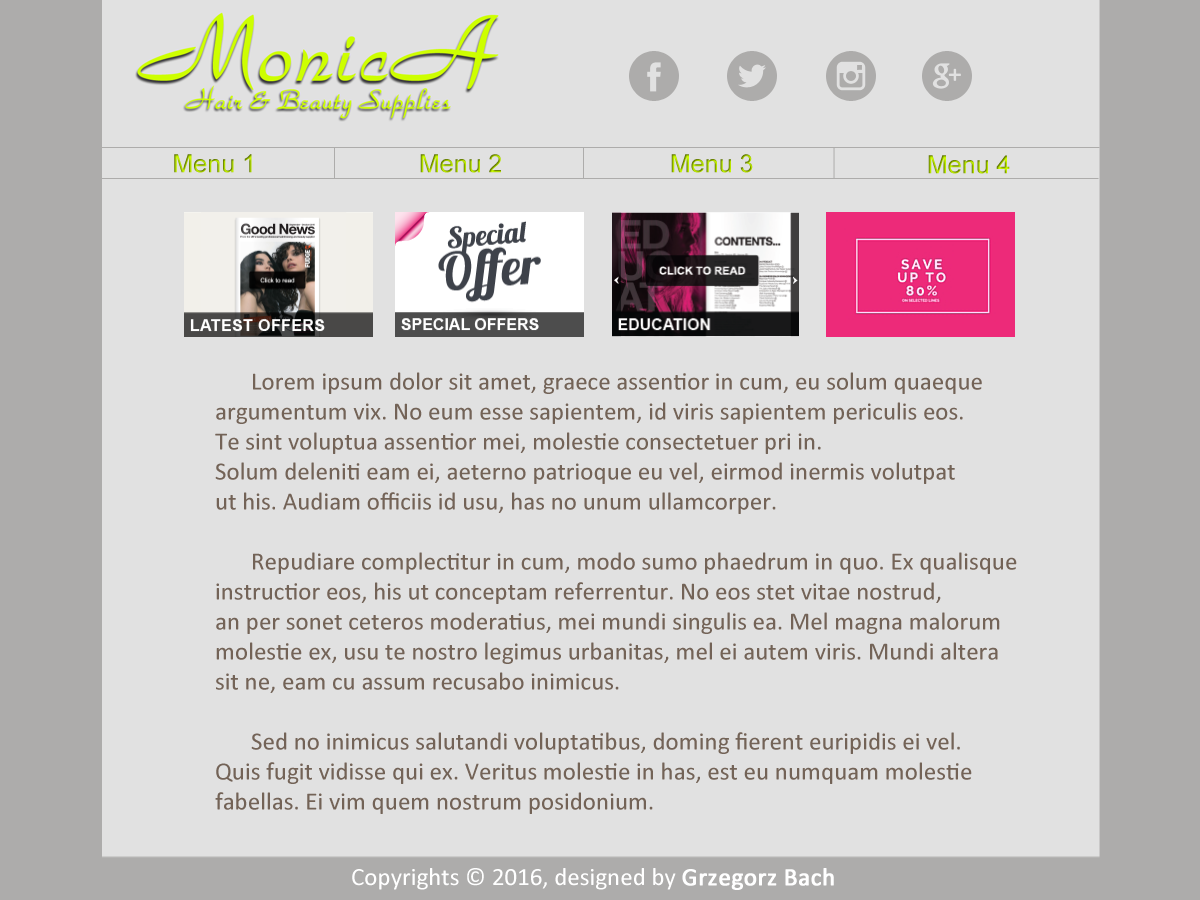
<style>
.page{position:relative;width:1200px;height:900px;background:#e1e1e1}
.page>*{position:absolute;margin:0}
.t1{font:25px "ArialMT"}
.t2{font:25px "Calibri";color:#736357}
.t3{font:25px "Calibri";color:#ffffff}
.t4{font:25px "Calibri";color:#ffffff;font-weight:bold}
</style>
<div class="page">
<p class="t1" style="left:174px;top:154px;width:78px;height:19px">Menu 1</p>
<p class="t1" style="left:420px;top:154px;width:81px;height:19px">Menu 2</p>
<p class="t1" style="left:671px;top:154px;width:82px;height:19px">Menu 3</p>
<p class="t1" style="left:928px;top:155px;width:82px;height:19px">Menu 4</p>
<p class="t2" style="left:215px;top:372px;width:802px;height:442px">Lorem ipsum dolor sit amet, graece assentior in cum, eu solum quaeque <br>argumentum vix. No eum esse sapientem, id viris sapientem periculis eos. <br>Te sint voluptua assentior mei, molestie consectetuer pri in. <br>Solum deleniti eam ei, aeterno patrioque eu vel, eirmod inermis volutpat <br>ut his. Audiam officiis id usu, has no unum ullamcorper.<br><br> Repudiare complectitur in cum, modo sumo phaedrum in quo. Ex qualisque <br>instructior eos, his ut conceptam referrentur. No eos stet vitae nostrud, <br>an per sonet ceteros moderatius, mei mundi singulis ea. Mel magna malorum <br>molestie ex, usu te nostro legimus urbanitas, mel ei autem viris. Mundi altera <br>sit ne, eam cu assum recusabo inimicus.<br><br> Sed no inimicus salutandi voluptatibus, doming fierent euripidis ei vel. <br>Quis fugit vidisse qui ex. Veritus molestie in has, est eu numquam molestie <br>fabellas. Ei vim quem nostrum posidonium.</p>
<p class="t3" style="left:352px;top:868px;width:482px;height:22px">Copyrights © 2016, designed by <span class="t4">Grzegorz Bach</span></p>
</div>
